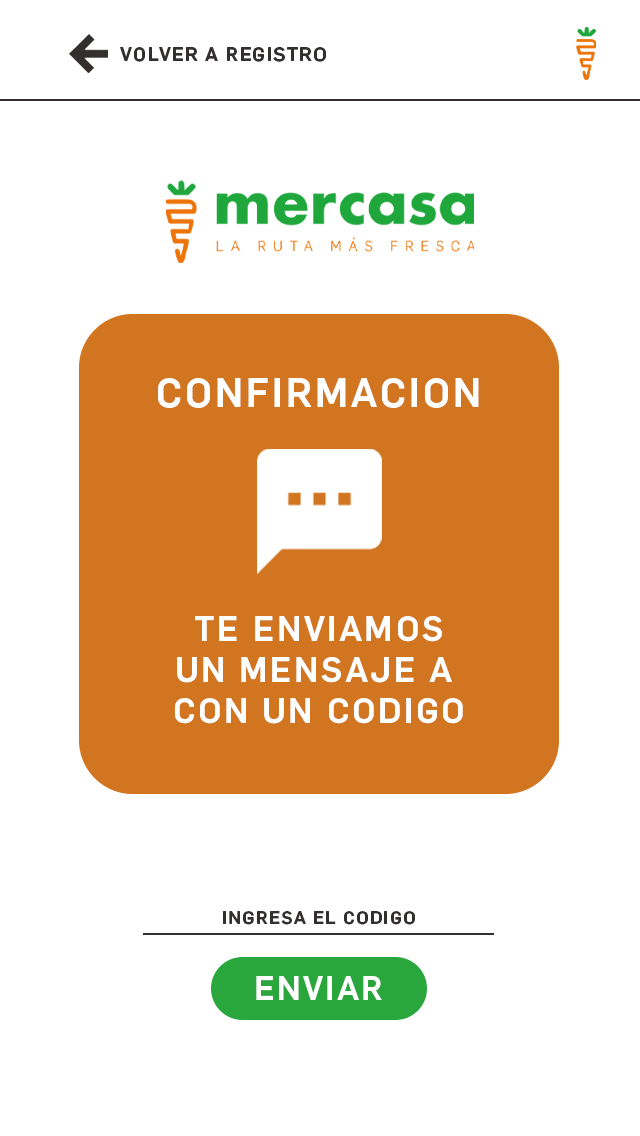
<style>
.page{position:relative;width:640px;height:1136px;background:#ffffff}
.page>*{position:absolute;margin:0}
.t1{font:19.1px "Flama-Medium";letter-spacing:0.075em;color:#332f2e}
.t2{font:40.2px "Flama-Medium";letter-spacing:0.075em;color:#ffffff}
.t3{font:34.3px "Flama-Medium";letter-spacing:0.075em;color:#ffffff}
.t4{font:18px "Flama-Medium";letter-spacing:0.075em;color:#332f2e}
</style>
<div class="page">
<p class="t1" style="left:120px;top:47px;width:206px;height:15px">VOLVER A REGISTRO</p>
<p class="t2" style="left:158px;top:378px;width:321px;height:30px">CONFIRMACION</p>
<p class="t3" style="left:175px;top:616px;width:288px;height:108px;text-align:center">TE ENVIAMOS<br>UN MENSAJE A <br>CON UN CODIGO</p>
<p class="t4" style="left:223px;top:911px;width:192px;height:14px">INGRESA EL CODIGO</p>
</div>
